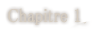
<style>
.page{position:relative;width:104px;height:31px;background:#ffffff}
.page>*{position:absolute;margin:0}
.t1{font:19px "MS-PMincho";color:#d6cdc1;font-weight:bold;scale:0.84 1}
</style>
<div class="page">
<p class="t1" style="left:8px;top:8px;width:73px;height:17px">Chapitre 1</p>
</div>
